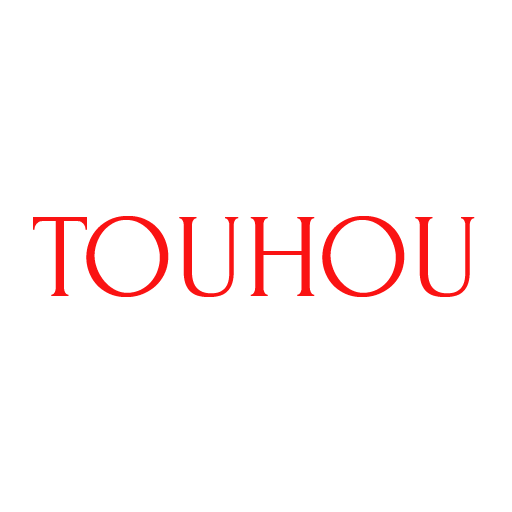
<style>
.page{position:relative;width:512px;height:512px;background:#ffffff}
.page>*{position:absolute;margin:0}
.t1{font:120px "Forum";color:#fa1313}
</style>
<div class="page">
<p class="t1" style="left:33px;top:216px;width:442px;height:81px">TOUHOU</p>
</div>
